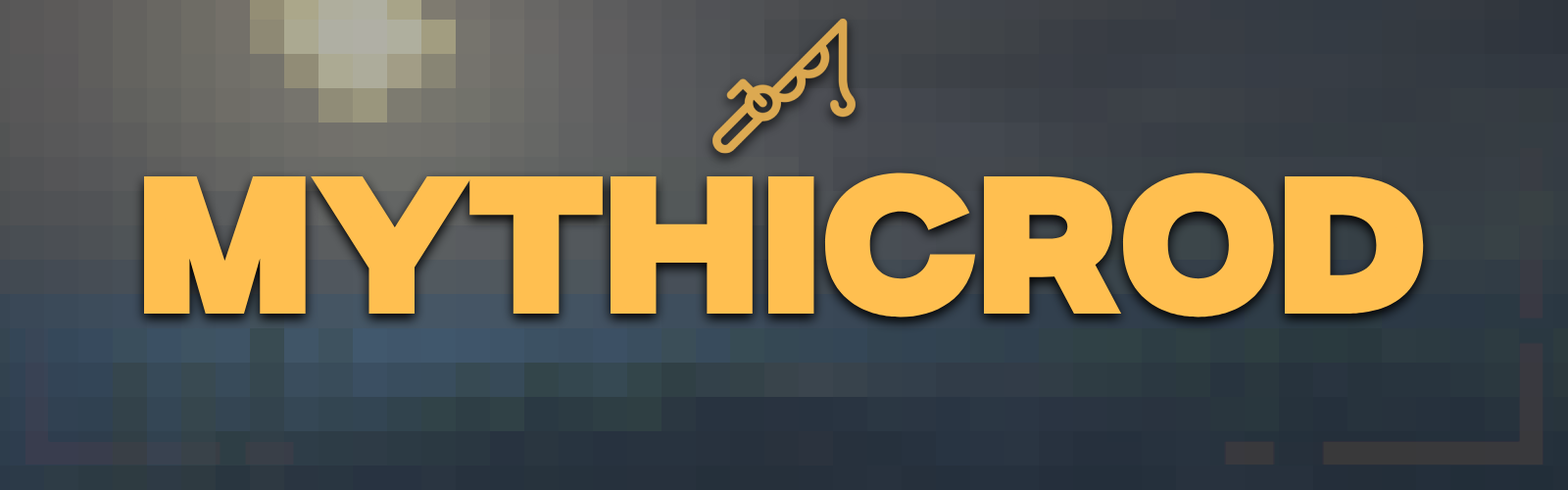
<style>
.page{position:relative;width:1568px;height:490px}
.page>*{position:absolute;margin:0}
.t1{font:196px "MilkerRegular";color:#ffbf50}
</style>
<div class="page">
<p class="t1" style="left:144px;top:172px;width:1280px;height:146px">MYTHICROD</p>
</div>
